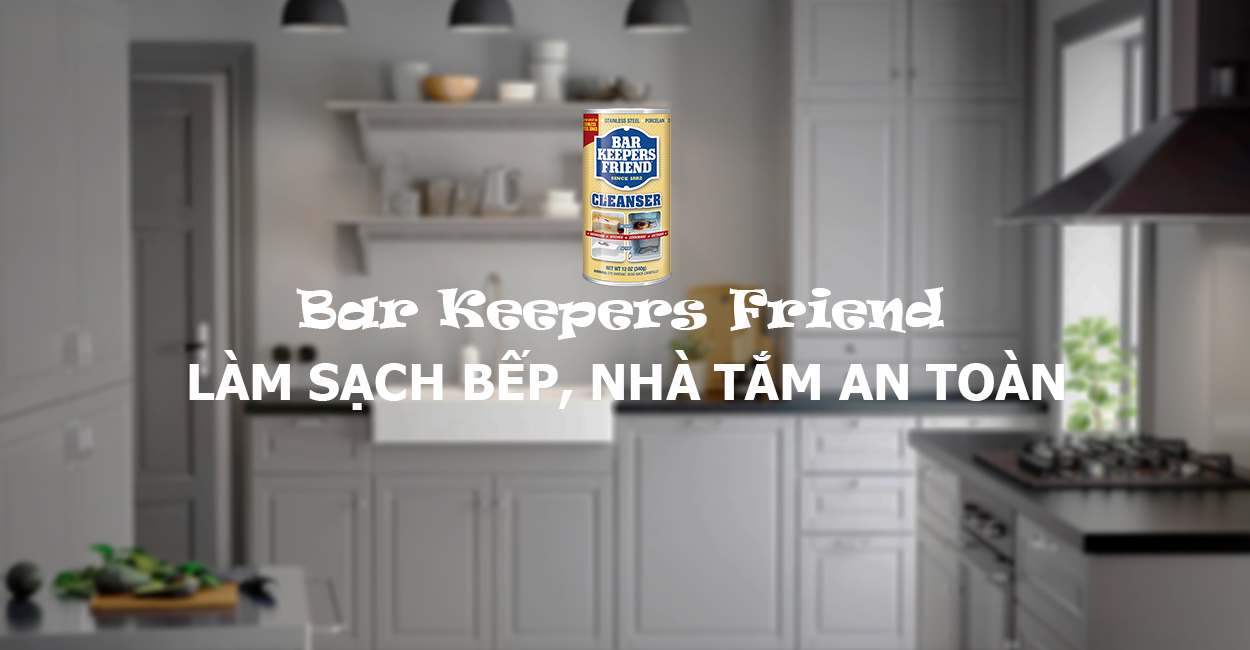
<style>
.page{position:relative;width:1250px;height:650px}
.page>*{position:absolute;margin:0}
.t1{font:50px "Ravie";color:#ffffff}
.t2{font:50px "Tahoma-Bold";color:#ffffff}
</style>
<div class="page">
<p class="t1" style="left:296px;top:287px;width:648px;height:53px">Bar Keepers Friend</p>
<p class="t2" style="left:189px;top:350px;width:875px;height:60px">LÀM SẠCH BẾP, NHÀ TẮM AN TOÀN</p>
</div>
